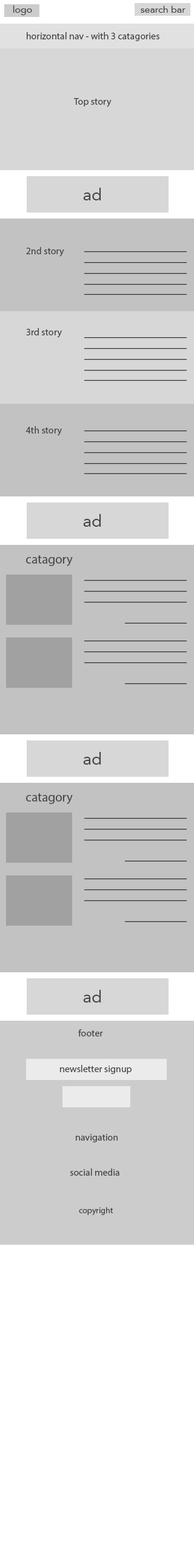
<style>
.page{position:relative;width:194px;height:1568px;background:#c2c2c2}
.page>*{position:absolute;margin:0}
.t1{font:9.7px "Avenir-Roman";color:#444444}
.t2{font:9.7px "MyriadPro-Regular";color:#444444}
.t3{font:17px "Avenir-Roman";color:#444444}
.t4{font:12.7px "MyriadPro-Regular";color:#444444}
.t5{font:8.5px "MyriadPro-Regular";color:#444444}
</style>
<div class="page">
<p class="t1" style="left:13px;top:5px;width:19px;height:10px">logo</p>
<p class="t1" style="left:140px;top:5px;width:45px;height:8px">search bar</p>
<p class="t2" style="left:27px;top:32px;width:132px;height:9px">horizontal nav - with 3 catagories</p>
<p class="t2" style="left:73px;top:98px;width:38px;height:9px">Top story</p>
<p class="t3" style="left:83px;top:188px;width:18px;height:12px">ad</p>
<p class="t2" style="left:26px;top:247px;width:38px;height:10px">2nd story</p>
<p class="t2" style="left:26px;top:328px;width:36px;height:10px">3rd story</p>
<p class="t2" style="left:26px;top:426px;width:36px;height:10px">4th story</p>
<p class="t3" style="left:83px;top:514px;width:18px;height:13px">ad</p>
<p class="t4" style="left:26px;top:555px;width:47px;height:11px">catagory</p>
<p class="t3" style="left:83px;top:752px;width:18px;height:13px">ad</p>
<p class="t4" style="left:26px;top:793px;width:47px;height:11px">catagory</p>
<p class="t2" style="left:78px;top:1029px;width:25px;height:7px">footer</p>
<p class="t2" style="left:60px;top:1065px;width:71px;height:9px">newsletter signup</p>
<p class="t2" style="left:76px;top:1134px;width:41px;height:8px">navigation</p>
<p class="t2" style="left:70px;top:1168px;width:49px;height:8px">social media</p>
<p class="t5" style="left:79px;top:1207px;width:34px;height:8px">copyright</p>
</div>
